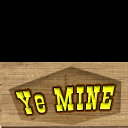
<style>
.page{position:relative;width:128px;height:128px;background:#000000}
.page>*{position:absolute;margin:0}
.t1{font:34.4px "OldTown";letter-spacing:0.05em}
</style>
<div class="page">
<p class="t1" style="left:15px;top:85px;width:100px;height:30px;rotate:-4deg">Ye MINE</p>
</div>
